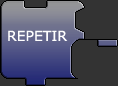
<style>
.page{position:relative;width:118px;height:86px;background:#333333}
.page>*{position:absolute;margin:0}
.t1{font:14px "Verdana";color:#ffffff}
</style>
<div class="page">
<p class="t1" style="left:8px;top:30px;width:60px;height:11px">REPETIR</p>
</div>
